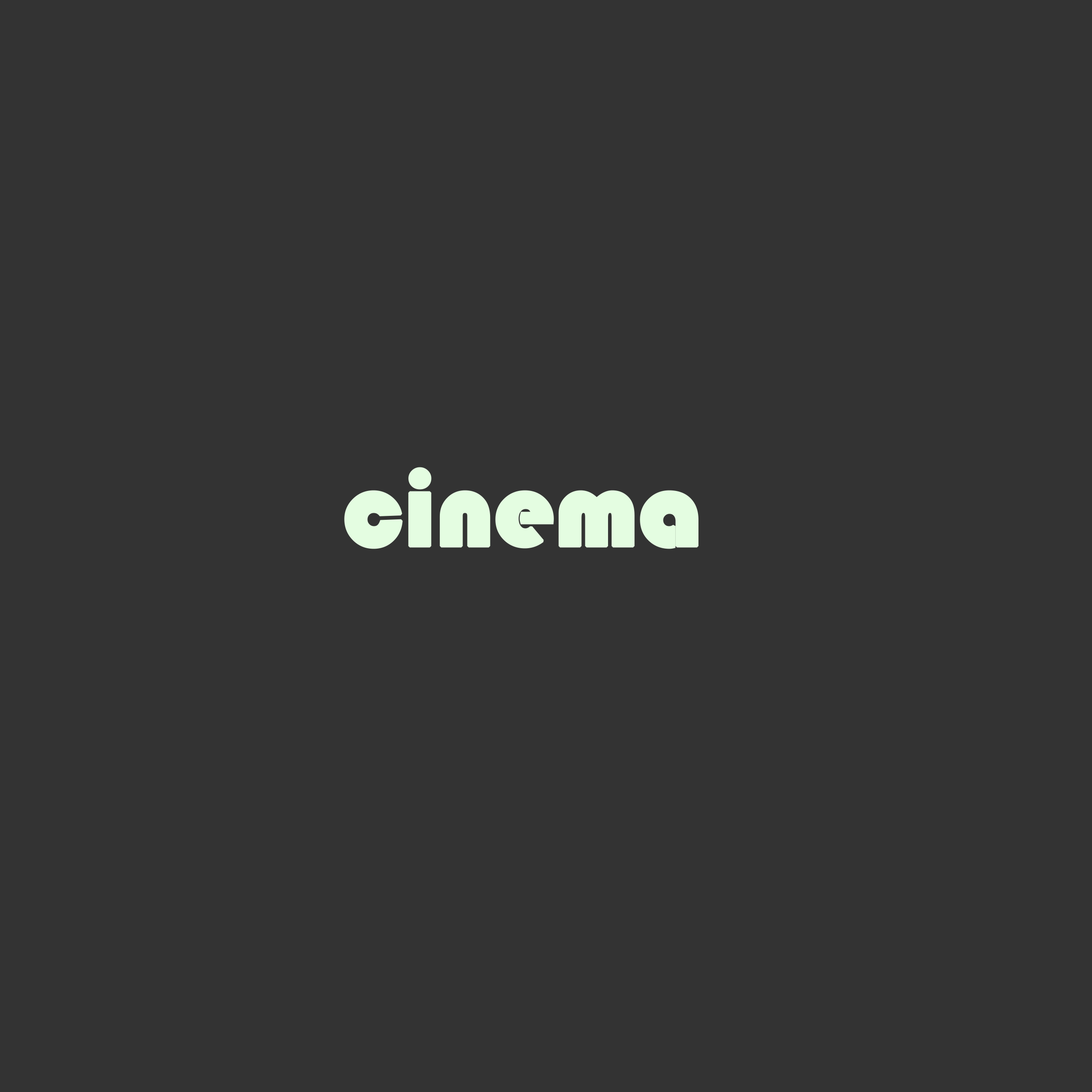
<style>
.page{position:relative;width:1092px;height:1092px;background:#333333}
.page>*{position:absolute;margin:0}
.t1{font:109.2px "Bauhaus93";letter-spacing:-0.029em;color:#e4fde1;font-weight:bold}
</style>
<div class="page">
<p class="t1" style="left:344px;top:467px;width:355px;height:82px">cinema</p>
</div>
